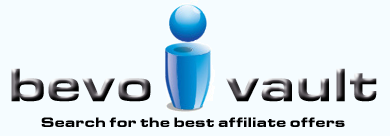
<style>
.page{position:relative;width:390px;height:136px;background:#f5fcff}
.page>*{position:absolute;margin:0}
.t1{font:48px "EurostarBlackExtended"}
.t2{font:14px "EurostarBlackExtended";color:#000000}
</style>
<div class="page">
<p class="t1" style="left:11px;top:68px;width:366px;height:34px">bevo      vault</p>
<p class="t2" style="left:41px;top:117px;width:304px;height:10px">Search for the best affiliate offers</p>
</div>
